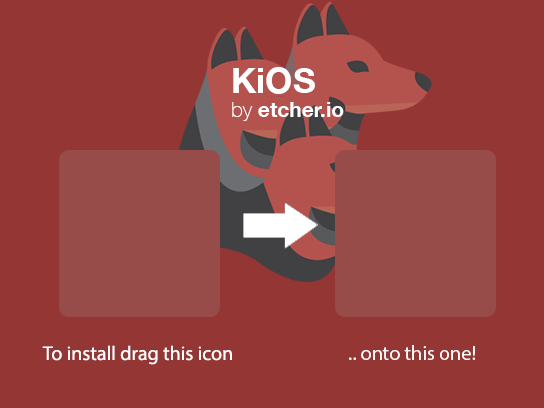
<style>
.page{position:relative;width:544px;height:408px;background:#943633}
.page>*{position:absolute;margin:0}
.t1{font:21px/8px "HelveticaNeue-Bold";color:#ffffff}
.t2{font:35px/8px "HelveticaNeue-Bold";color:#ffffff}
.t3{font:21px/8px "HelveticaNeue-Thin";color:#ffffff}
.t4{font:20px "MyriadPro-Regular";color:#ffffff}
</style>
<div class="page">
<p class="t1" style="left:232px;top:67px;width:112px;height:54px"><span class="t2">KiOS<br><br></span><span class="t3"><br>by </span>etcher.io</p>
<p class="t4" style="left:42px;top:345px;width:190px;height:20px">To install drag this icon</p>
<p class="t4" style="left:349px;top:345px;width:126px;height:15px">.. onto this one!</p>
</div>
